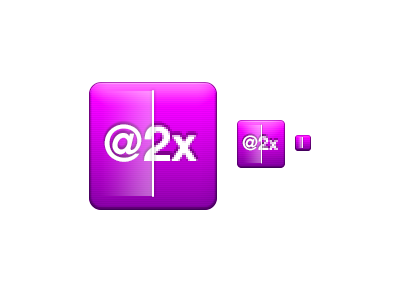
<style>
.page{position:relative;width:400px;height:300px;background:#ffffff}
.page>*{position:absolute;margin:0}
.t1{font:50px "HelveticaNeue-Bold";color:#ffffff}
.t2{font:20px "HelveticaNeue-Bold";color:#ffffff}
</style>
<div class="page">
<p class="t1" style="left:104px;top:124px;width:94px;height:38px">@2x</p>
<p class="t2" style="left:242px;top:135px;width:38px;height:16px">@2x</p>
</div>
